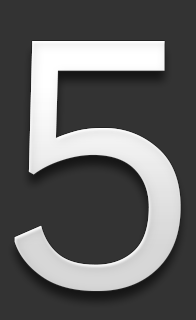
<style>
.page{position:relative;width:196px;height:320px;background:#333333}
.page>*{position:absolute;margin:0}
.t1{font:344.1px "Prelude-Medium";color:#ececec}
</style>
<div class="page">
<p class="t1" style="left:14px;top:41px;width:167px;height:250px">5</p>
<p class="t1" style="left:14px;top:41px;width:167px;height:250px">5</p>
</div>
